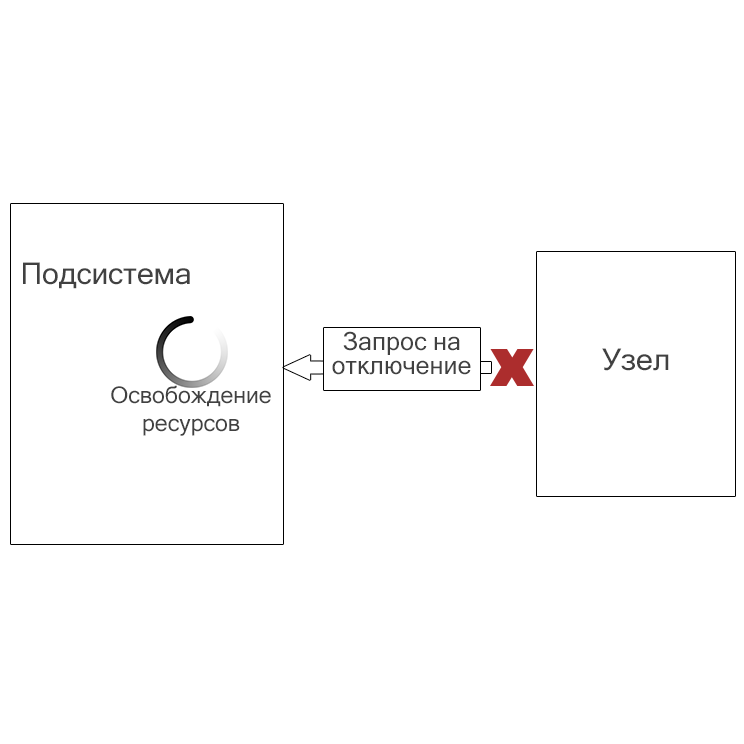
<style>
.page{position:relative;width:744px;height:744px;background:#ffffff}
.page>*{position:absolute;margin:0}
.t1{font:30px "MicrosoftSansSerif";color:#414141}
.t2{font:25px/24px "MicrosoftSansSerif";color:#414141}
.t3{font:23px "MicrosoftSansSerif";color:#414141}
</style>
<div class="page">
<p class="t1" style="left:23px;top:262px;width:167px;height:27px">Подсистема</p>
<p class="t2" style="left:332px;top:331px;width:139px;height:44px;text-align:center">Запрос на<br>отключение</p>
<p class="t1" style="left:602px;top:348px;width:67px;height:23px">Узел</p>
<p class="t3" style="left:111px;top:385px;width:160px;height:51px;text-align:center">Освобождение<br>ресурсов</p>
</div>
